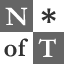
<style>
.page{position:relative;width:64px;height:64px;background:#ffffff}
.page>*{position:absolute;margin:0}
.t1{font:27px "Garamond-Bold";color:#ffffff}
.t2{font:33px "Garamond-Bold";color:#323232}
.t3{font:27px "Garamond-Bold";color:#323232}
</style>
<div class="page">
<p class="t1" style="left:5px;top:7px;width:23px;height:19px">N</p>
<p class="t2" style="left:41px;top:8px;width:15px;height:15px">*</p>
<p class="t3" style="left:4px;top:38px;width:24px;height:19px">of</p>
<p class="t1" style="left:38px;top:38px;width:18px;height:19px">T</p>
</div>
